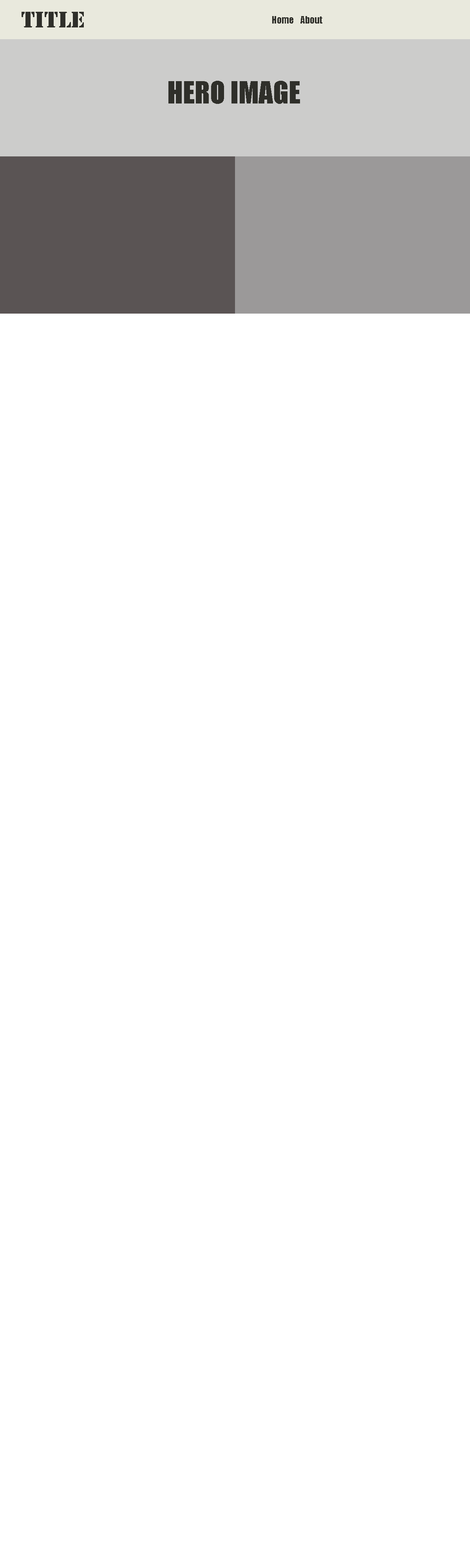
<style>
.page{position:relative;width:470px;height:1568px;background:#ffffff}
.page>*{position:absolute;margin:0}
.t1{font:23.5px "Stencil";color:#2f2f2a}
.t2{font:9.4px "Impact";color:#2f2f2a}
.t3{font:28.2px "Impact";color:#2f2f2a}
</style>
<div class="page">
<p class="t1" style="left:22px;top:12px;width:62px;height:15px">Title</p>
<p class="t2" style="left:272px;top:16px;width:22px;height:8px">Home</p>
<p class="t2" style="left:301px;top:16px;width:22px;height:8px">About</p>
<p class="t3" style="left:169px;top:81px;width:131px;height:23px">HERO IMAGE</p>
</div>
